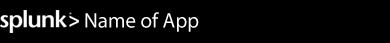
<style>
.page{position:relative;width:390px;height:43px;background:#000000}
.page>*{position:absolute;margin:0}
.t1{font:21px "MyriadPro-Regular";color:#ffffff}
</style>
<div class="page">
<p class="t1" style="left:85px;top:12px;width:114px;height:20px">Name of App</p>
</div>
